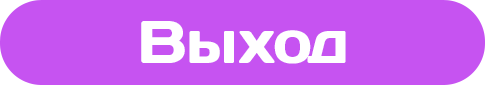
<style>
.page{position:relative;width:485px;height:85px;background:#c653f1}
.page>*{position:absolute;margin:0}
.t1{font:60px "Days";color:#ffffff}
</style>
<div class="page">
<p class="t1" style="left:141px;top:21px;width:205px;height:43px">Выход</p>
</div>
